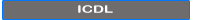
<style>
.page{position:relative;width:224px;height:20px;background:#6e6c6c}
.page>*{position:absolute;margin:0}
.t1{font:10.2px "ArialRoundedMTBold";color:#fcfcfc;scale:1.47 1}
</style>
<div class="page">
<p class="t1" style="left:78px;top:5px;width:35px;height:8px">ICDL</p>
</div>
